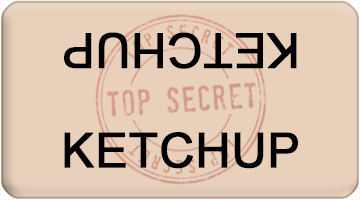
<style>
.page{position:relative;width:360px;height:200px;background:#e8d0bb}
.page>*{position:absolute;margin:0}
.t1{font:48px "ArialMT";color:#000000;font-weight:bold}
</style>
<div class="page">
<p class="t1" style="left:64px;top:32px;width:233px;height:37px;rotate:180deg">KETCHUP</p>
<p class="t1" style="left:64px;top:132px;width:234px;height:37px">KETCHUP</p>
</div>
